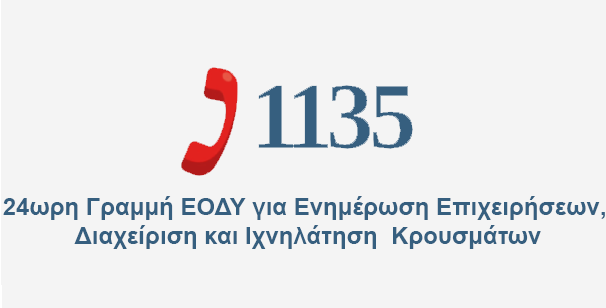
<style>
.page{position:relative;width:606px;height:308px;background:#f4f4f4}
.page>*{position:absolute;margin:0}
.t1{font:24px "Arial-BoldMT";color:#365f7f}
</style>
<div class="page">
<p class="t1" style="left:3px;top:196px;width:602px;height:53px;text-align:center">24ωρη Γραμμή ΕΟΔΥ για Ενημέρωση Επιχειρήσεων, <br>Διαχείριση και Ιχνηλάτηση  Κρουσμάτων</p>
</div>
